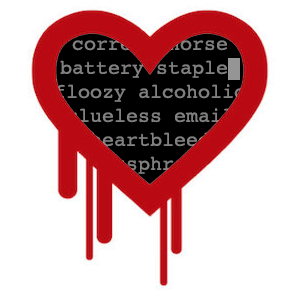
<style>
.page{position:relative;width:300px;height:300px;background:#ffffff}
.page>*{position:absolute;margin:0}
.t1{font:20px "Courier";color:#808080}
.t2{font:20px "Courier";color:#ffffff}
</style>
<div class="page">
<p class="t1" style="left:55px;top:36px;width:190px;height:138px;text-align:center">correct horse battery staple<span class="t2">-<br></span>floozy alcoholic clueless email<br>heartbleed<br>passphrase</p>
</div>
